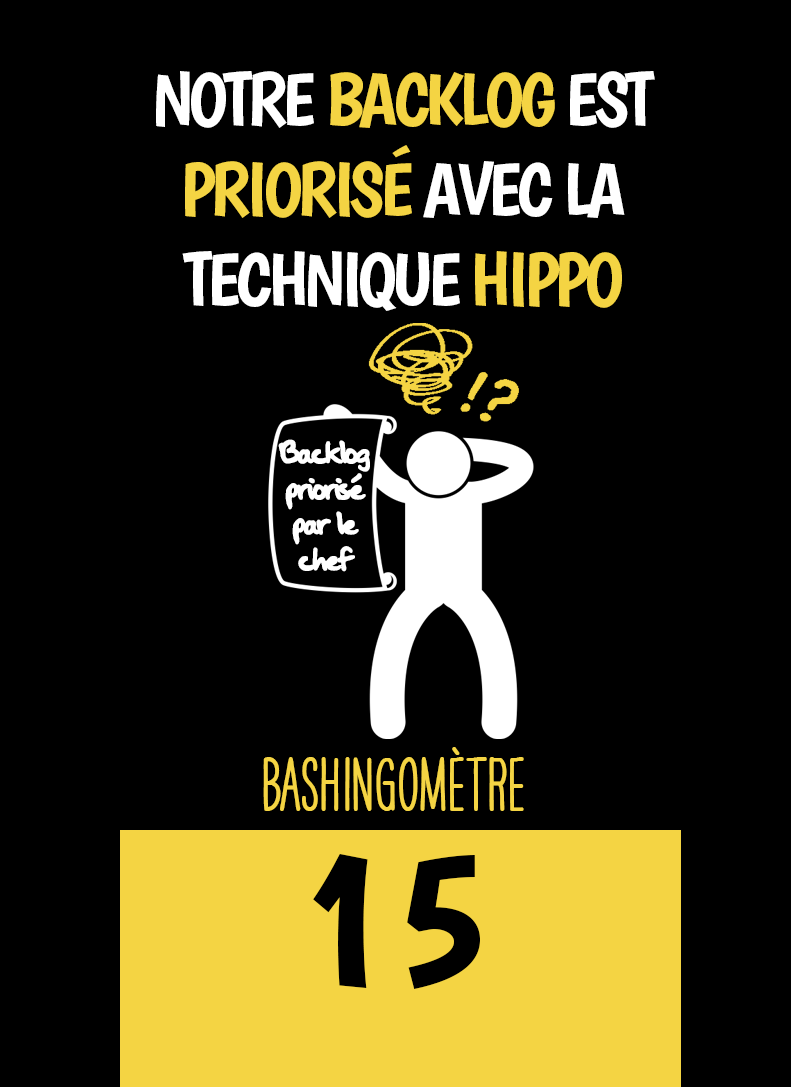
<style>
.page{position:relative;width:791px;height:1087px;background:#000000}
.page>*{position:absolute;margin:0}
.t1{font:75px "Boogaloo-Regular";letter-spacing:-0.06em;color:#ffffff}
.t2{font:75px "Boogaloo-Regular";letter-spacing:-0.06em;color:#f4d443}
.t3{font:37.5px/35.8px "OakStreetW01-Regular";letter-spacing:-0.08em;color:#ffffff}
.t4{font:66.7px "HAVEANICEDAYTallW04-Bold";color:#f4d443}
.t5{font:200px "Boogaloo-Regular";color:#000000}
</style>
<div class="page">
<p class="t1" style="left:156px;top:71px;width:499px;height:240px;text-align:center">NOTRE <span class="t2">BACKLOG </span>EST <span class="t2">PRIORISÉ </span>AVEC LA TECHNIQUE <span class="t2">HIPPO</span></p>
<p class="t3" style="left:278px;top:439px;width:92px;height:133px;text-align:center">Backlog<br>priorisé<br>par le<br>chef</p>
<p class="t4" style="left:263px;top:747px;width:261px;height:64px">BASHINgomètre</p>
<p class="t5" style="left:313px;top:854px;width:167px;height:135px">15</p>
</div>
